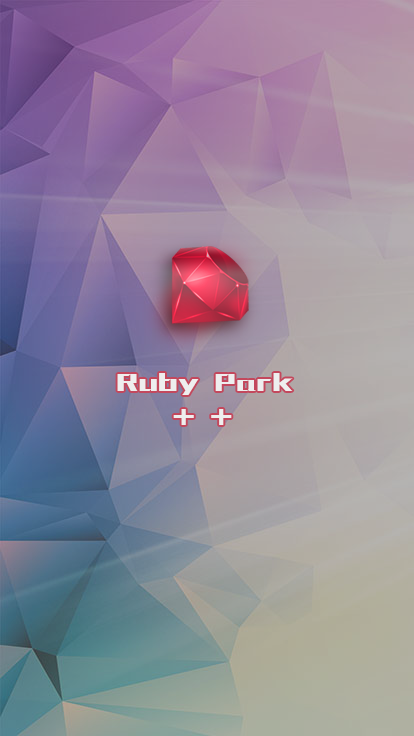
<style>
.page{position:relative;width:414px;height:736px}
.page>*{position:absolute;margin:0}
.t1{font:30px "huxiaobo-gdh";color:#eeeeee}
</style>
<div class="page">
<p class="t1" style="left:117px;top:373px;width:176px;height:22px">Ruby Park</p>
<p class="t1" style="left:173px;top:409px;width:59px;height:16px">+ +</p>
</div>
